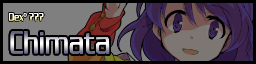
<style>
.page{position:relative;width:256px;height:64px;background:#7f7f7f}
.page>*{position:absolute;margin:0}
.t1{font:12px "ChaneyThinNormal"}
.t2{font:36px "ChaneyThinNormal"}
</style>
<div class="page">
<p class="t1" style="left:8px;top:13px;width:36px;height:8px">Dexº ???</p>
<p class="t2" style="left:10px;top:31px;width:100px;height:23px">Chimata</p>
</div>
